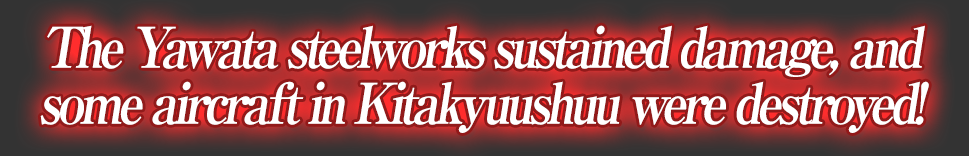
<style>
.page{position:relative;width:969px;height:156px}
.page>*{position:absolute;margin:0}
.t1{font:56px/60px "RyuminPro-ExBold";letter-spacing:-0.1em;color:#ffffff;font-style:italic;scale:0.9 1}
.t2{font:56px/56px "RyuminPro-ExBold";letter-spacing:-0.1em;color:#ffffff;font-style:italic;scale:0.9 1}
</style>
<div class="page">
<p class="t1" style="left:40px;top:25px;width:889px;height:108px;text-align:center"><span class="t2">The Yawata steelworks sustained damage, and<br></span>some aircraft in Kitakyuushuu were destroyed!</p>
</div>
